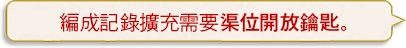
<style>
.page{position:relative;width:406px;height:48px;background:#f8f1e9}
.page>*{position:absolute;margin:0}
.t1{font:20px "GothicMB101Pr6N-Light";color:#c20000}
.t2{font:20px "GothicMB101Pr6N-Medium";color:#c20000}
</style>
<div class="page">
<p class="t1" style="left:59px;top:12px;width:288px;height:20px">編成記錄擴充需要<span class="t2">渠位開放鑰匙</span>。</p>
</div>
